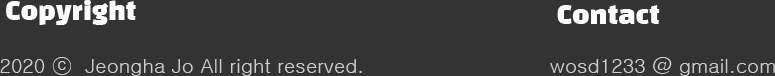
<style>
.page{position:relative;width:775px;height:76px;background:#333333}
.page>*{position:absolute;margin:0}
.t1{font:25px "BlackHanSans-Regular";color:#fbfbfb}
.t2{font:20px "Gulim";color:#cecece}
</style>
<div class="page">
<p class="t1" style="left:6px;top:0px;width:130px;height:25px">Copyright</p>
<p class="t1" style="left:557px;top:5px;width:103px;height:19px">Contact</p>
<p class="t2" style="left:0px;top:57px;width:362px;height:19px">2020 ⓒ  Jeongha Jo All right reserved.</p>
<p class="t2" style="left:550px;top:57px;width:225px;height:19px">wosd1233 @ gmail.com</p>
</div>
